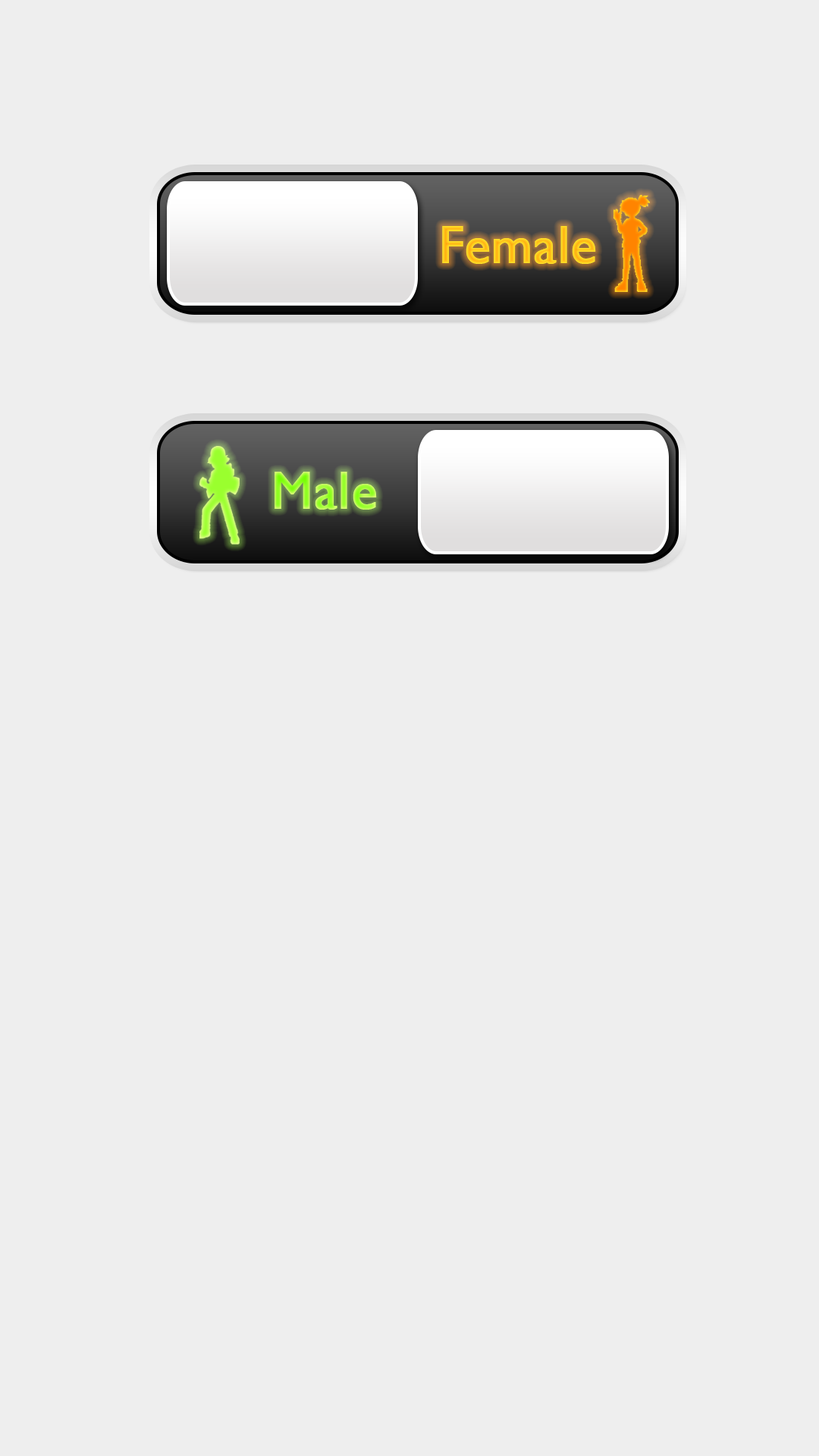
<style>
.page{position:relative;width:819px;height:1456px;background:#eeeeee}
.page>*{position:absolute;margin:0}
.t1{font:53.1px "GillSansMT";color:#ffcc1f;font-weight:bold}
.t2{font:53.1px "GillSansMT";font-weight:bold}
</style>
<div class="page">
<p class="t1" style="left:442px;top:226px;width:154px;height:38px">Female</p>
<p class="t2" style="left:275px;top:472px;width:102px;height:38px">Male</p>
</div>
